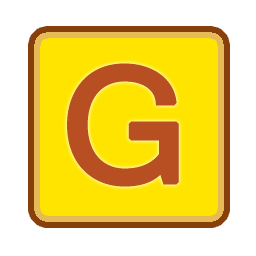
<style>
.page{position:relative;width:256px;height:256px;background:#ffffff}
.page>*{position:absolute;margin:0}
.t1{font:178px "Vrinda";letter-spacing:0.06em;color:#b74f22;font-weight:bold}
</style>
<div class="page">
<p class="t1" style="left:67px;top:63px;width:112px;height:124px">G</p>
</div>
